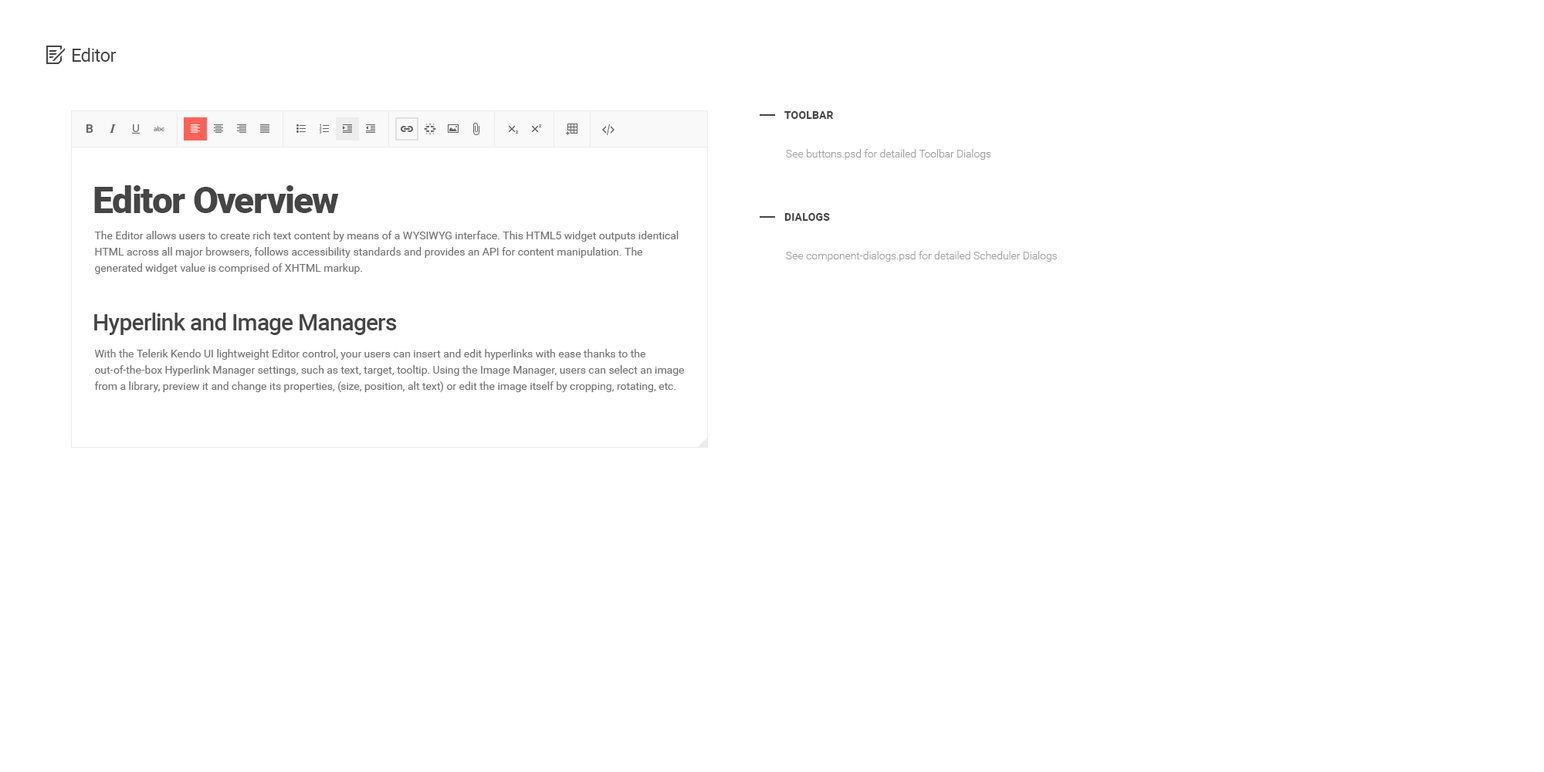
<style>
.page{position:relative;width:1544px;height:772px;background:#ffffff}
.page>*{position:absolute;margin:0}
.t1{font:18.5px "Roboto-Regular";letter-spacing:-0.025em;color:#454545}
.t2{font:10.8px "Roboto-Bold";letter-spacing:0.01em;color:#454545;text-transform:uppercase}
.t3{font:10.8px "Roboto-Light";color:#a1a1a1}
.t4{font:37.1px "Roboto-Black";letter-spacing:-0.025em;color:#454545}
.t5{font:10.8px/16.2px "Roboto-Regular";color:#757575}
.t6{font:23.2px "Roboto-Medium";letter-spacing:-0.025em;color:#454545}
</style>
<div class="page">
<p class="t1" style="left:73px;top:48px;width:44px;height:14px">Editor</p>
<p class="t2" style="left:785px;top:111px;width:49px;height:8px">ToolBar</p>
<p class="t3" style="left:786px;top:149px;width:205px;height:11px">See buttons.psd for detailed Toolbar Dialogs</p>
<p class="t4" style="left:94px;top:185px;width:245px;height:28px">Editor Overview</p>
<p class="t2" style="left:785px;top:213px;width:45px;height:8px">Dialogs</p>
<p class="t5" style="left:94px;top:231px;width:585px;height:43px">The Editor allows users to create rich text content by means of a WYSIWYG interface. This HTML5 widget outputs identical HTML across all major browsers, follows accessibility standards and provides an API for content manipulation. The generated widget value is comprised of XHTML markup.</p>
<p class="t3" style="left:786px;top:251px;width:271px;height:11px">See component-dialogs.psd for detailed Scheduler Dialogs</p>
<p class="t6" style="left:94px;top:313px;width:303px;height:22px">Hyperlink and Image Managers</p>
<p class="t5" style="left:94px;top:349px;width:590px;height:43px">With the Telerik Kendo UI lightweight Editor control, your users can insert and edit hyperlinks with ease thanks to the out-of-the-box Hyperlink Manager settings, such as text, target, tooltip. Using the Image Manager, users can select an image from a library, preview it and change its properties, (size, position, alt text) or edit the image itself by cropping, rotating, etc.</p>
</div>
